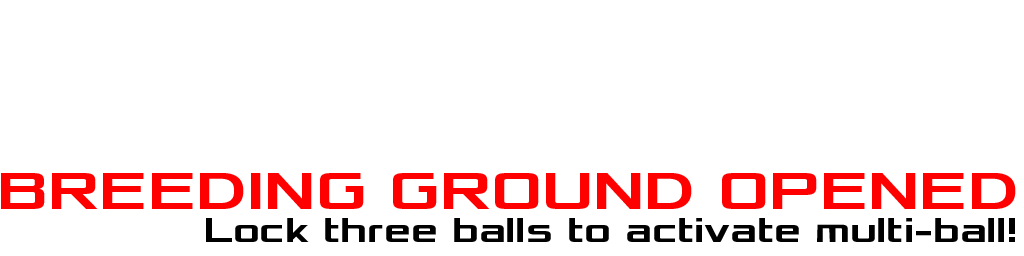
<style>
.page{position:relative;width:1024px;height:256px;background:#ffffff}
.page>*{position:absolute;margin:0}
.t1{font:55px "Xolonium-Bold";color:#ff0000}
.t2{font:36px "Xolonium-Bold";color:#000000}
</style>
<div class="page">
<p class="t1" style="left:1px;top:173px;width:1015px;height:36px">BREEDING GROUND OPENED</p>
<p class="t2" style="left:206px;top:218px;width:809px;height:24px">Lock three balls to activate multi-ball!</p>
</div>
